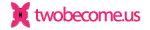
<style>
.page{position:relative;width:150px;height:30px;background:#ffffff}
.page>*{position:absolute;margin:0}
.t1{font:20px "MyriadPro-Regular";letter-spacing:-0.075em;color:#f02777}
</style>
<div class="page">
<p class="t1" style="left:34px;top:6px;width:107px;height:16px">twobecome.us</p>
</div>
